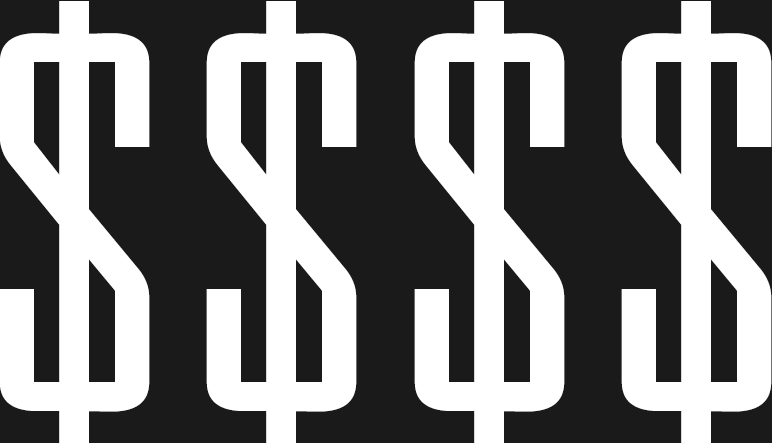
<style>
.page{position:relative;width:772px;height:443px;background:#1a1a1a}
.page>*{position:absolute;margin:0}
.t1{font:500px "AgencyFB-Reg";color:#ffffff}
</style>
<div class="page">
<p class="t1" style="left:0px;top:1px;width:772px;height:442px">$$$$</p>
</div>
